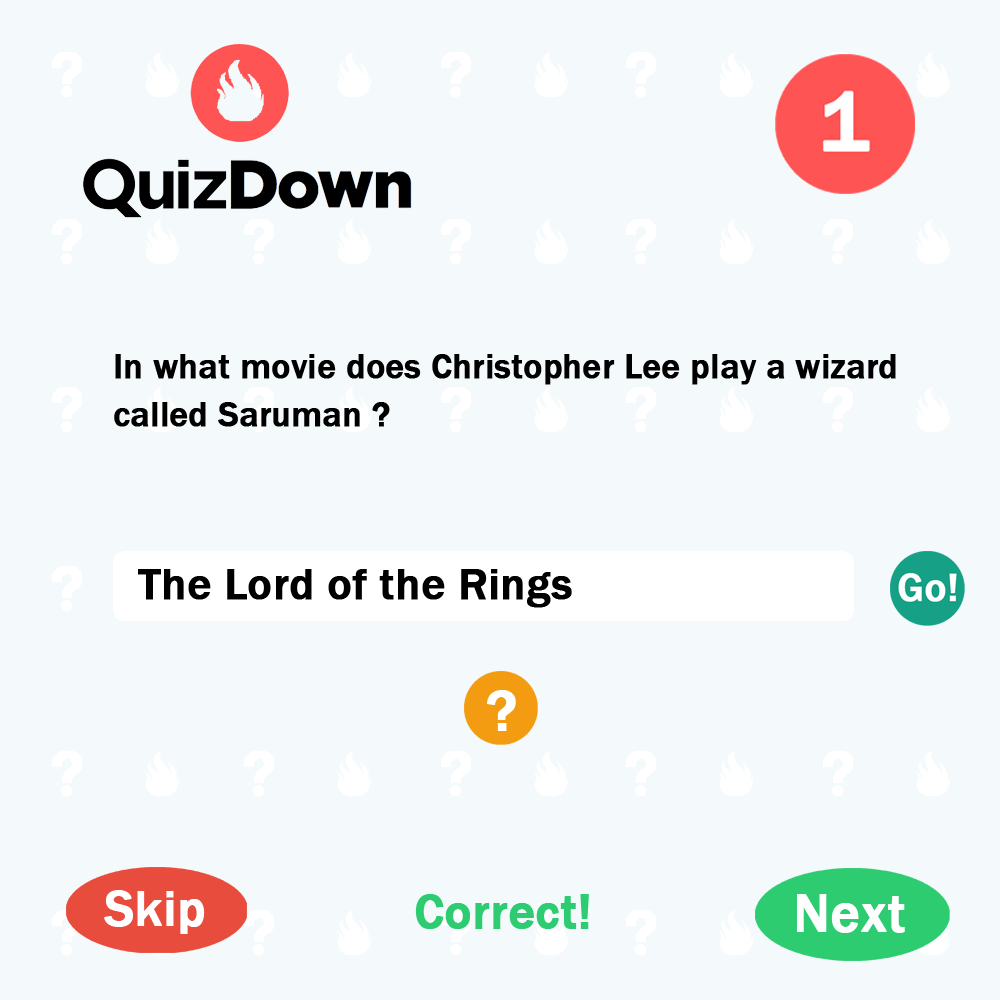
<style>
.page{position:relative;width:1000px;height:1000px;background:#f4fafc}
.page>*{position:absolute;margin:0}
.t1{font:35px/48px "FranklinGothic-Medium";color:#000000;font-weight:bold}
.t2{font:45px "FranklinGothic-Medium";color:#000000;font-weight:bold}
.t3{font:60.1px "FranklinGothic-Medium";color:#ffffff;font-weight:bold}
.t4{font:51.2px "FranklinGothic-Medium";color:#ffffff;font-weight:bold}
.t5{font:50px "FranklinGothic-Medium";color:#2ecc71;font-weight:bold}
.t6{font:55px "FranklinGothic-Medium";color:#ffffff;font-weight:bold}
</style>
<div class="page">
<p class="t1" style="left:114px;top:354px;width:782px;height:73px">In what movie does Christopher Lee play a wizard called Saruman ?</p>
<p class="t2" style="left:138px;top:569px;width:434px;height:39px">The Lord of the Rings</p>
<p class="t3" style="left:487px;top:690px;width:29px;height:41px">?</p>
<p class="t4" style="left:104px;top:890px;width:101px;height:44px">Skip</p>
<p class="t5" style="left:415px;top:894px;width:174px;height:35px">Correct!</p>
<p class="t6" style="left:797px;top:894px;width:108px;height:39px">Next</p>
</div>
